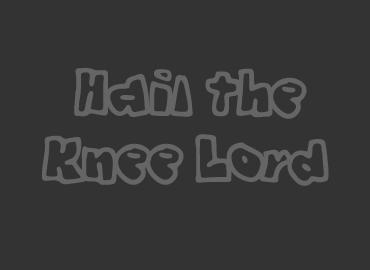
<style>
.page{position:relative;width:370px;height:270px;background:#333333}
.page>*{position:absolute;margin:0}
.t1{font:55px "Graffiti";color:#656565}
</style>
<div class="page">
<p class="t1" style="left:42px;top:68px;width:287px;height:118px;text-align:right">Hail the  <br>Knee Lord</p>
</div>
